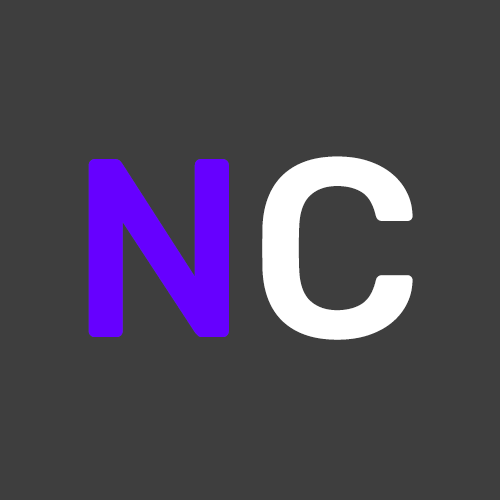
<style>
.page{position:relative;width:500px;height:500px;background:#3e3e3e}
.page>*{position:absolute;margin:0}
.t1{font:254px "RubikRoman-Medium";color:#6600ff}
.t2{font:254px "RubikRoman-Medium";color:#ffffff}
</style>
<div class="page">
<p class="t1" style="left:88px;top:156px;width:325px;height:184px">N<span class="t2">C</span></p>
</div>
